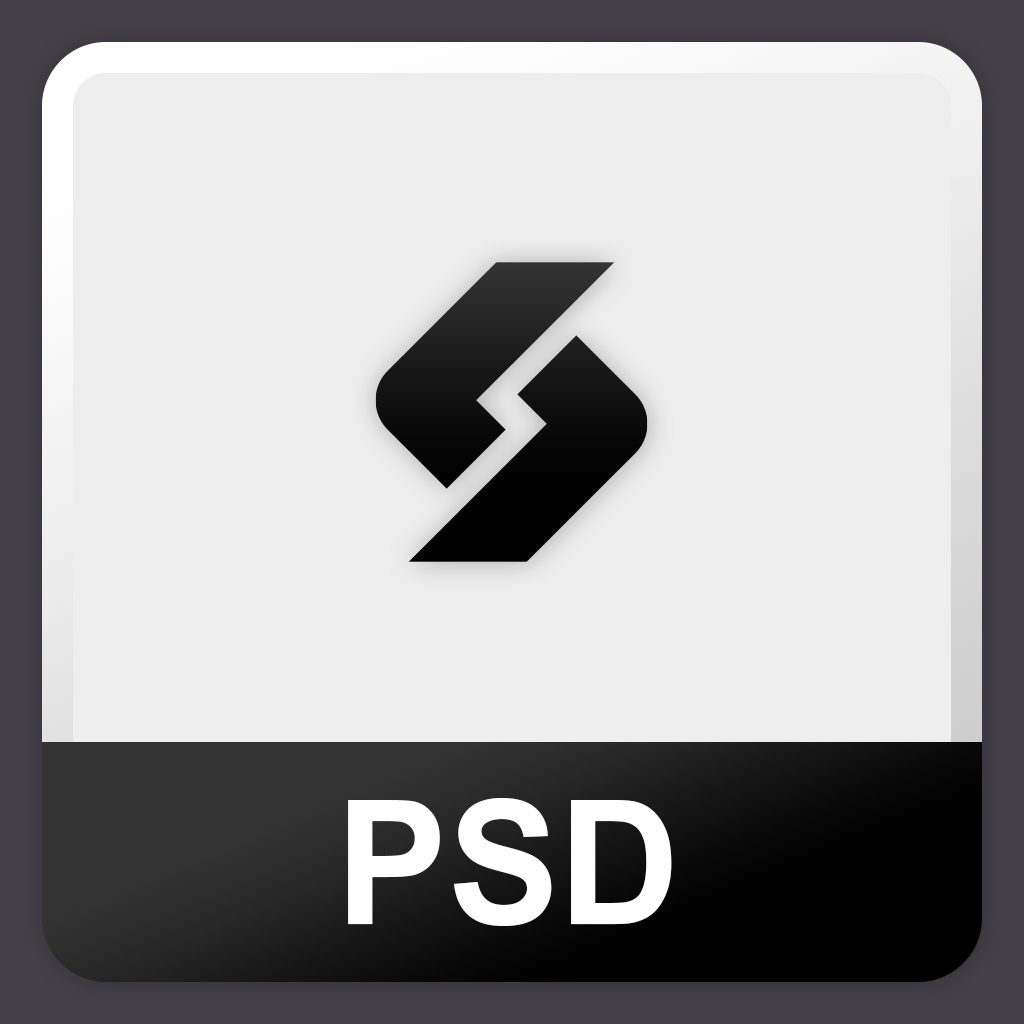
<style>
.page{position:relative;width:1024px;height:1024px;background:#eeeeee}
.page>*{position:absolute;margin:0}
.t1{font:172.6px "Arial-BoldMT";color:#ffffff}
</style>
<div class="page">
<p class="t1" style="left:348px;top:798px;width:324px;height:128px">PSD</p>
</div>
